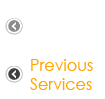
<style>
.page{position:relative;width:105px;height:99px;background:#ffffff}
.page>*{position:absolute;margin:0}
.t1{font:16px "CenturyGothic";color:#ffa500}
</style>
<div class="page">
<p class="t1" style="left:30px;top:59px;width:63px;height:31px">Previous<br>Services</p>
</div>
